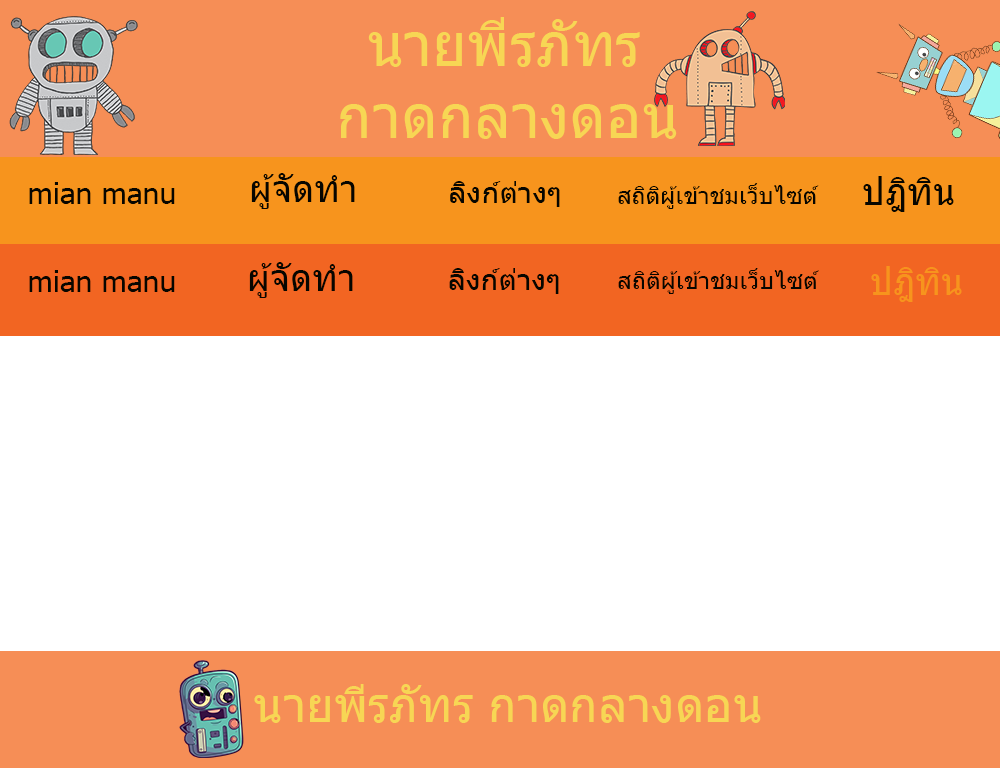
<style>
.page{position:relative;width:1000px;height:768px;background:#ffffff}
.page>*{position:absolute;margin:0}
.t1{font:60px "Tahoma";color:#f7d654}
.t2{font:36px "Tahoma";color:#070600}
.t3{font:30px "Tahoma";color:#070600}
.t4{font:24px "Tahoma";color:#070600}
.t5{font:36px "Tahoma";color:#f7941d}
.t6{font:48px "Tahoma";color:#f7d654}
</style>
<div class="page">
<p class="t1" style="left:340px;top:17px;width:337px;height:122px">นายพีรภัทร    <br>   กาดกลางดอน</p>
<p class="t2" style="left:251px;top:173px;width:104px;height:36px">ผู้จัดทำ</p>
<p class="t3" style="left:29px;top:182px;width:146px;height:22px">mian manu</p>
<p class="t3" style="left:450px;top:181px;width:110px;height:26px">ลิงก์ต่างๆ</p>
<p class="t4" style="left:618px;top:183px;width:201px;height:26px">สถิติผู้เข้าชมเว็บไซต์</p>
<p class="t2" style="left:863px;top:176px;width:91px;height:36px">ปฎิทิน</p>
<p class="t3" style="left:29px;top:270px;width:146px;height:22px">mian manu</p>
<p class="t2" style="left:249px;top:262px;width:104px;height:36px">ผู้จัดทำ</p>
<p class="t3" style="left:449px;top:268px;width:110px;height:26px">ลิงก์ต่างๆ</p>
<p class="t4" style="left:618px;top:268px;width:201px;height:26px">สถิติผู้เข้าชมเว็บไซต์</p>
<p class="t5" style="left:871px;top:266px;width:91px;height:36px">ปฎิทิน</p>
<p class="t6" style="left:254px;top:684px;width:507px;height:39px">นายพีรภัทร กาดกลางดอน</p>
</div>
